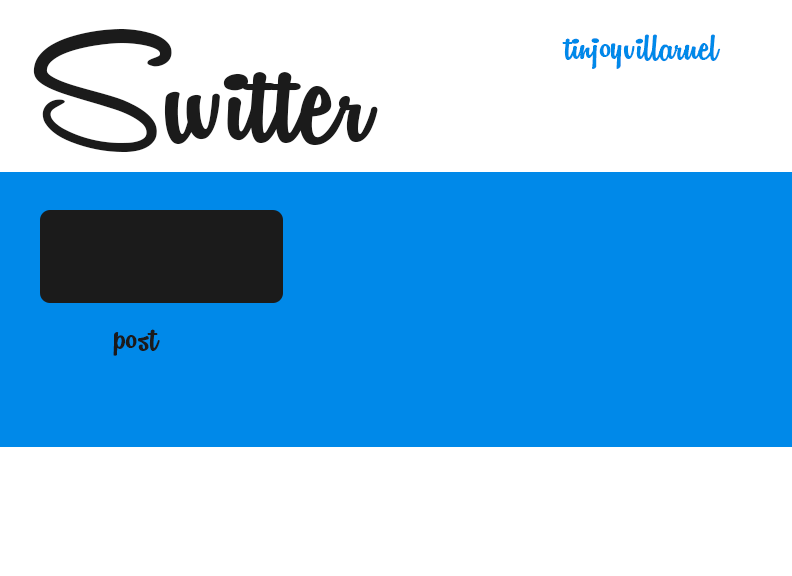
<style>
.page{position:relative;width:792px;height:576px;background:#ffffff}
.page>*{position:absolute;margin:0}
.t1{font:173px "RemachineScriptPersonalUse";color:#1b1b1b}
.t2{font:53px "RemachineScriptPersonalUse";color:#0089e9}
.t3{font:53px "RemachineScriptPersonalUse";color:#1b1b1b}
</style>
<div class="page">
<p class="t1" style="left:33px;top:29px;width:345px;height:123px">Switter</p>
<p class="t2" style="left:562px;top:34px;width:159px;height:35px">tinjoyvillaruel</p>
<p class="t3" style="left:113px;top:329px;width:47px;height:27px">post</p>
</div>
